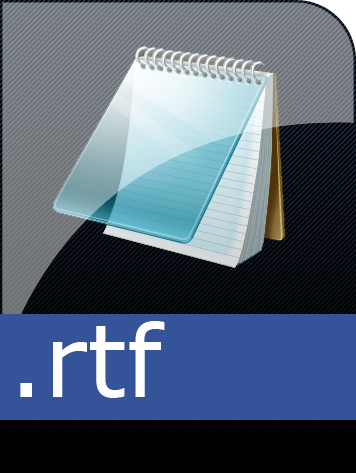
<style>
.page{position:relative;width:356px;height:473px;background:#345399}
.page>*{position:absolute;margin:0}
.t1{font:100px "Verdana";color:#ffffff}
</style>
<div class="page">
<p class="t1" style="left:20px;top:321px;width:145px;height:77px">.rtf</p>
</div>
